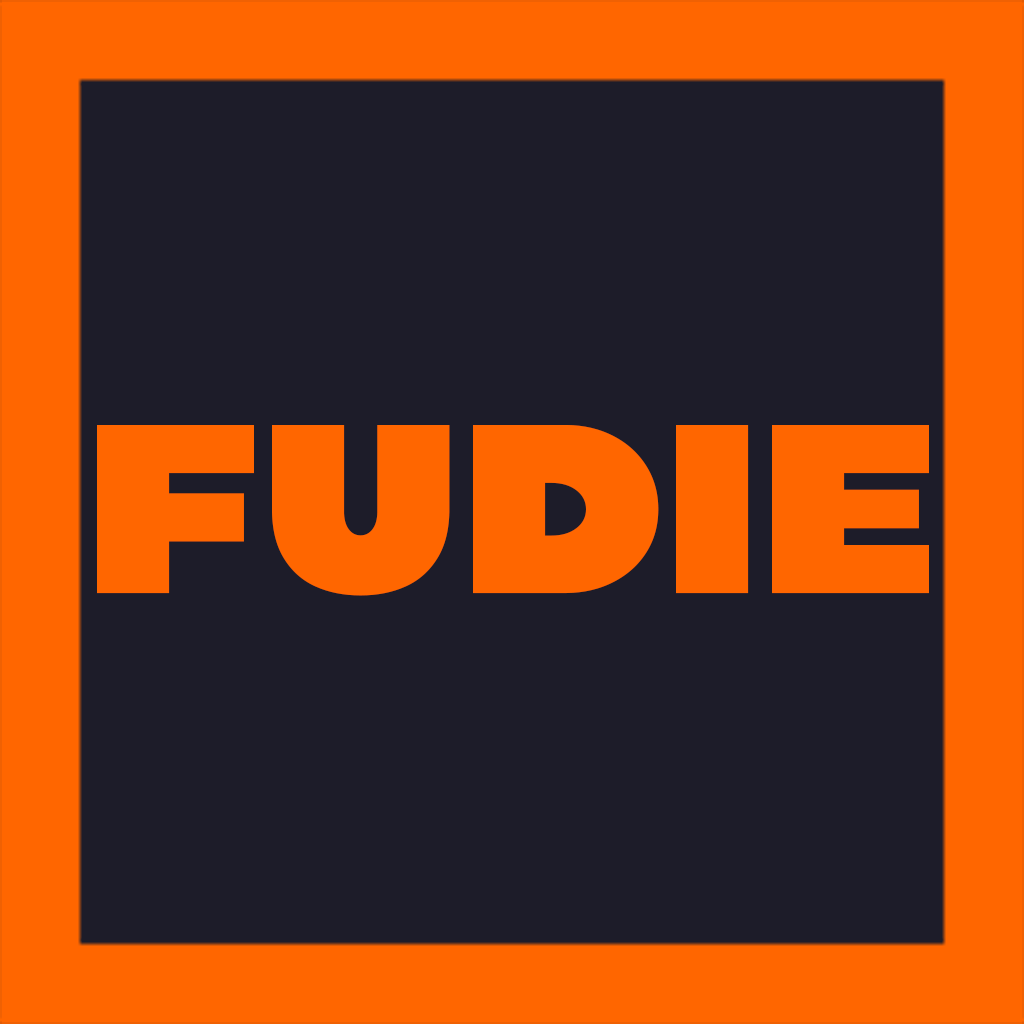
<style>
.page{position:relative;width:1024px;height:1024px;background:#1d1c29}
.page>*{position:absolute;margin:0}
.t1{font:240px "C800-Regular";color:#ff6600}
</style>
<div class="page">
<p class="t1" style="left:97px;top:425px;width:832px;height:171px">fudie</p>
</div>
